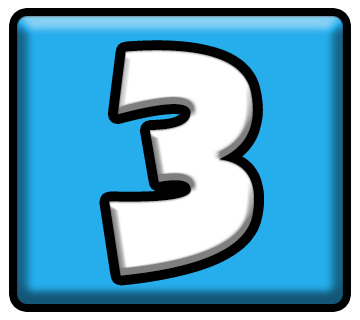
<style>
.page{position:relative;width:360px;height:320px;background:#26adec}
.page>*{position:absolute;margin:0}
.t1{font:303.3px "Funhouse";color:#ffffff;scale:0.91 1}
</style>
<div class="page">
<p class="t1" style="left:109px;top:50px;width:145px;height:226px">3</p>
</div>
